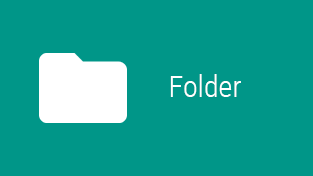
<style>
.page{position:relative;width:313px;height:176px;background:#009688}
.page>*{position:absolute;margin:0}
.t1{font:30px "RobotoCondensed-Light";color:#ffffff}
</style>
<div class="page">
<p class="t1" style="left:170px;top:74px;width:71px;height:23px">Folder</p>
</div>
